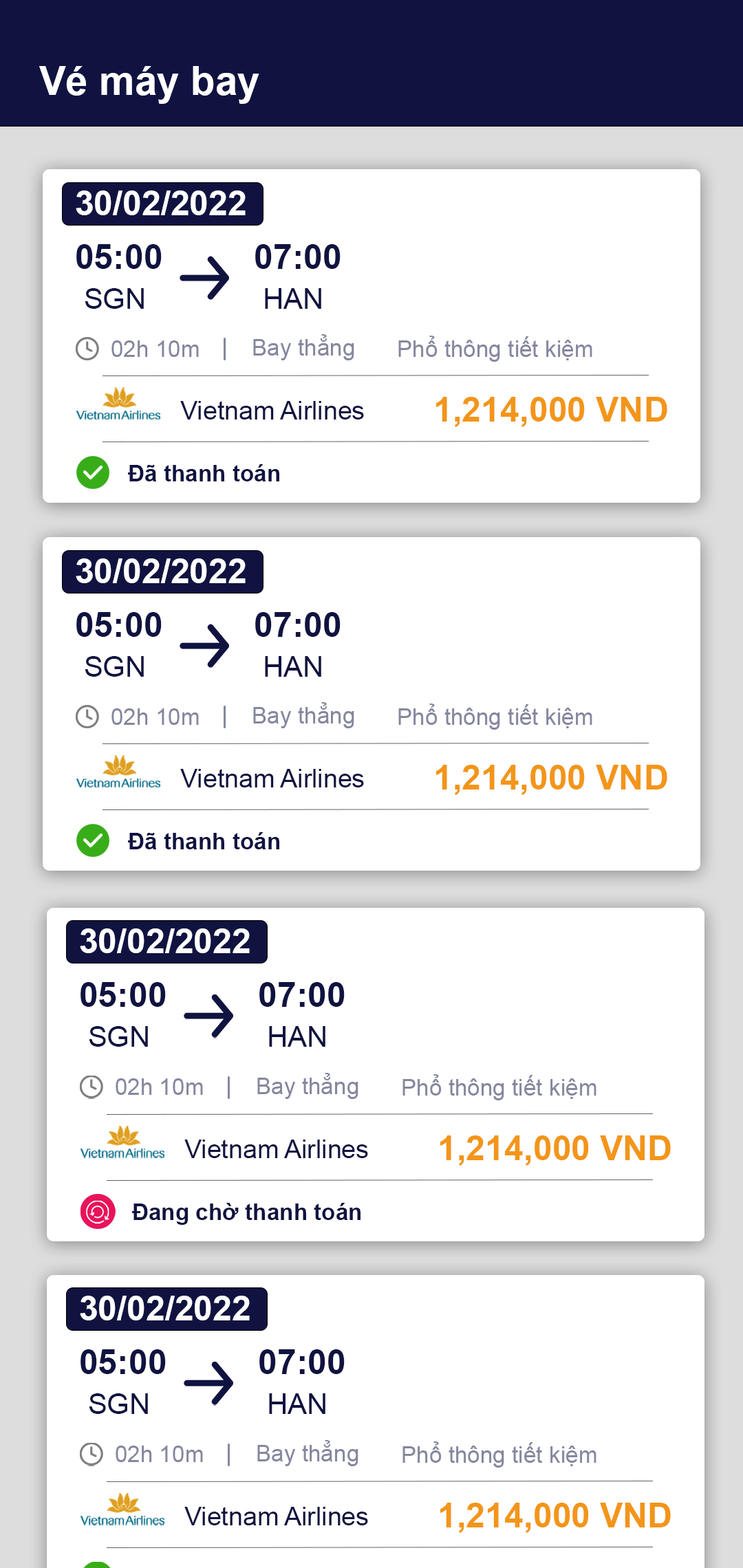
<style>
.page{position:relative;width:743px;height:1568px;background:#ffffff}
.page>*{position:absolute;margin:0}
.t1{font:40.1px "Arial-BoldMT";color:#ffffff}
.t2{font:34.4px "Arial-BoldMT";color:#ffffff}
.t3{font:34.4px "Arial-BoldMT";color:#101340}
.t4{font:28.7px "ArialMT";color:#101340}
.t5{font:22.9px "ArialMT";color:#85879e}
.t6{font:25.8px "ArialMT";color:#101340}
.t7{font:34.4px "Arial-BoldMT";color:#f39519}
.t8{font:22.9px "Arial-BoldMT";color:#101340}
</style>
<div class="page">
<p class="t1" style="left:39px;top:66px;width:220px;height:38px">Vé máy bay</p>
<p class="t2" style="left:76px;top:190px;width:170px;height:25px">30/02/2022</p>
<p class="t3" style="left:76px;top:244px;width:86px;height:25px">05:00</p>
<p class="t3" style="left:255px;top:244px;width:85px;height:25px">07:00</p>
<p class="t4" style="left:85px;top:288px;width:59px;height:21px">SGN</p>
<p class="t4" style="left:265px;top:288px;width:56px;height:21px">HAN</p>
<p class="t5" style="left:111px;top:340px;width:88px;height:17px">02h 10m</p>
<p class="t5" style="left:253px;top:334px;width:101px;height:26px">Bay thẳng</p>
<p class="t5" style="left:398px;top:336px;width:194px;height:26px">Phổ thông tiết kiệm</p>
<p class="t6" style="left:180px;top:401px;width:184px;height:19px">Vietnam Airlines</p>
<p class="t7" style="left:436px;top:397px;width:231px;height:30px">1,214,000 VND</p>
<p class="t8" style="left:128px;top:464px;width:151px;height:17px">Đã thanh toán</p>
<p class="t2" style="left:76px;top:558px;width:170px;height:25px">30/02/2022</p>
<p class="t3" style="left:76px;top:612px;width:86px;height:25px">05:00</p>
<p class="t3" style="left:255px;top:612px;width:85px;height:25px">07:00</p>
<p class="t4" style="left:85px;top:656px;width:59px;height:21px">SGN</p>
<p class="t4" style="left:265px;top:656px;width:56px;height:21px">HAN</p>
<p class="t5" style="left:111px;top:708px;width:88px;height:17px">02h 10m</p>
<p class="t5" style="left:253px;top:702px;width:101px;height:26px">Bay thẳng</p>
<p class="t5" style="left:398px;top:704px;width:194px;height:26px">Phổ thông tiết kiệm</p>
<p class="t6" style="left:180px;top:769px;width:184px;height:18px">Vietnam Airlines</p>
<p class="t7" style="left:436px;top:765px;width:231px;height:30px">1,214,000 VND</p>
<p class="t8" style="left:128px;top:832px;width:151px;height:17px">Đã thanh toán</p>
<p class="t2" style="left:80px;top:928px;width:170px;height:25px">30/02/2022</p>
<p class="t3" style="left:80px;top:982px;width:86px;height:25px">05:00</p>
<p class="t3" style="left:259px;top:982px;width:86px;height:25px">07:00</p>
<p class="t4" style="left:89px;top:1026px;width:59px;height:21px">SGN</p>
<p class="t4" style="left:269px;top:1026px;width:56px;height:21px">HAN</p>
<p class="t5" style="left:257px;top:1073px;width:101px;height:26px">Bay thẳng</p>
<p class="t5" style="left:116px;top:1078px;width:87px;height:17px">02h 10m</p>
<p class="t5" style="left:402px;top:1074px;width:194px;height:26px">Phổ thông tiết kiệm</p>
<p class="t6" style="left:184px;top:1140px;width:184px;height:18px">Vietnam Airlines</p>
<p class="t7" style="left:440px;top:1135px;width:231px;height:31px">1,214,000 VND</p>
<p class="t8" style="left:132px;top:1203px;width:228px;height:22px">Đang chờ thanh toán</p>
<p class="t2" style="left:80px;top:1296px;width:170px;height:24px">30/02/2022</p>
<p class="t3" style="left:80px;top:1349px;width:86px;height:25px">05:00</p>
<p class="t3" style="left:259px;top:1349px;width:86px;height:25px">07:00</p>
<p class="t4" style="left:89px;top:1393px;width:59px;height:21px">SGN</p>
<p class="t4" style="left:269px;top:1393px;width:56px;height:21px">HAN</p>
<p class="t5" style="left:116px;top:1446px;width:87px;height:16px">02h 10m</p>
<p class="t5" style="left:257px;top:1440px;width:101px;height:26px">Bay thẳng</p>
<p class="t5" style="left:402px;top:1441px;width:194px;height:27px">Phổ thông tiết kiệm</p>
<p class="t7" style="left:440px;top:1503px;width:231px;height:30px">1,214,000 VND</p>
<p class="t6" style="left:184px;top:1507px;width:184px;height:18px">Vietnam Airlines</p>
</div>
